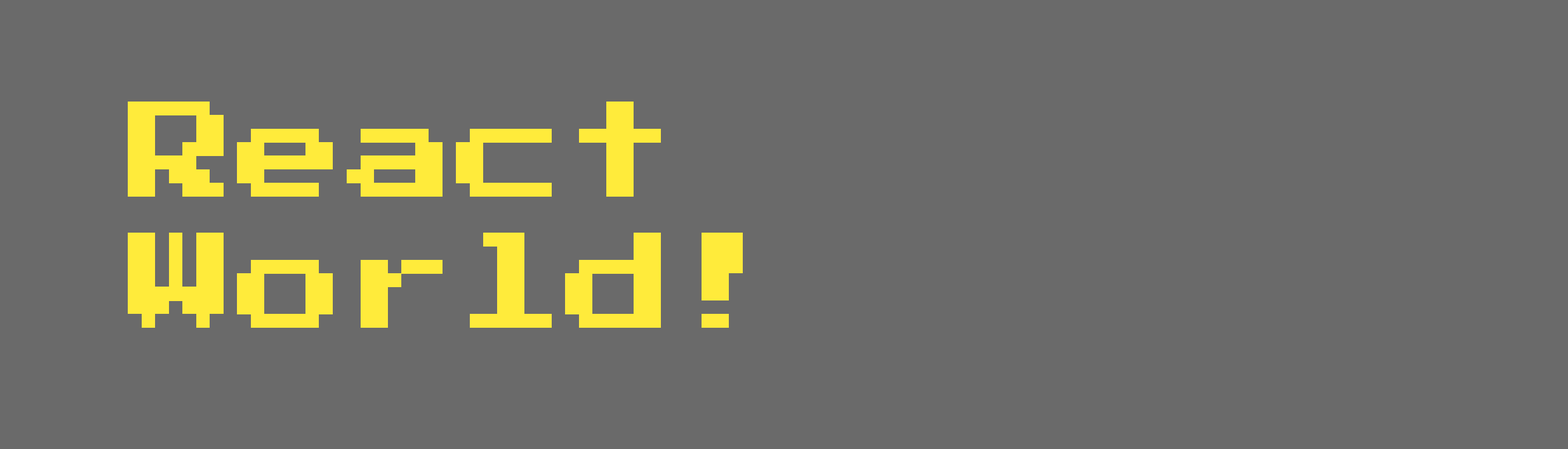
<style>
.page{position:relative;width:1568px;height:449px;background:#6a6a6a}
.page>*{position:absolute;margin:0}
.t1{font:109.3px "PressStart2P-Regular";color:#ffeb3b}
</style>
<div class="page">
<p class="t1" style="left:128px;top:102px;width:615px;height:226px">React<br>World!</p>
</div>
